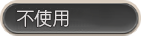
<style>
.page{position:relative;width:141px;height:36px}
.page>*{position:absolute;margin:0}
.t1{font:18px "GothicMB101Pr6N-Light";color:#e0dddd}
</style>
<div class="page">
<p class="t1" style="left:17px;top:10px;width:52px;height:17px">不使用</p>
</div>
